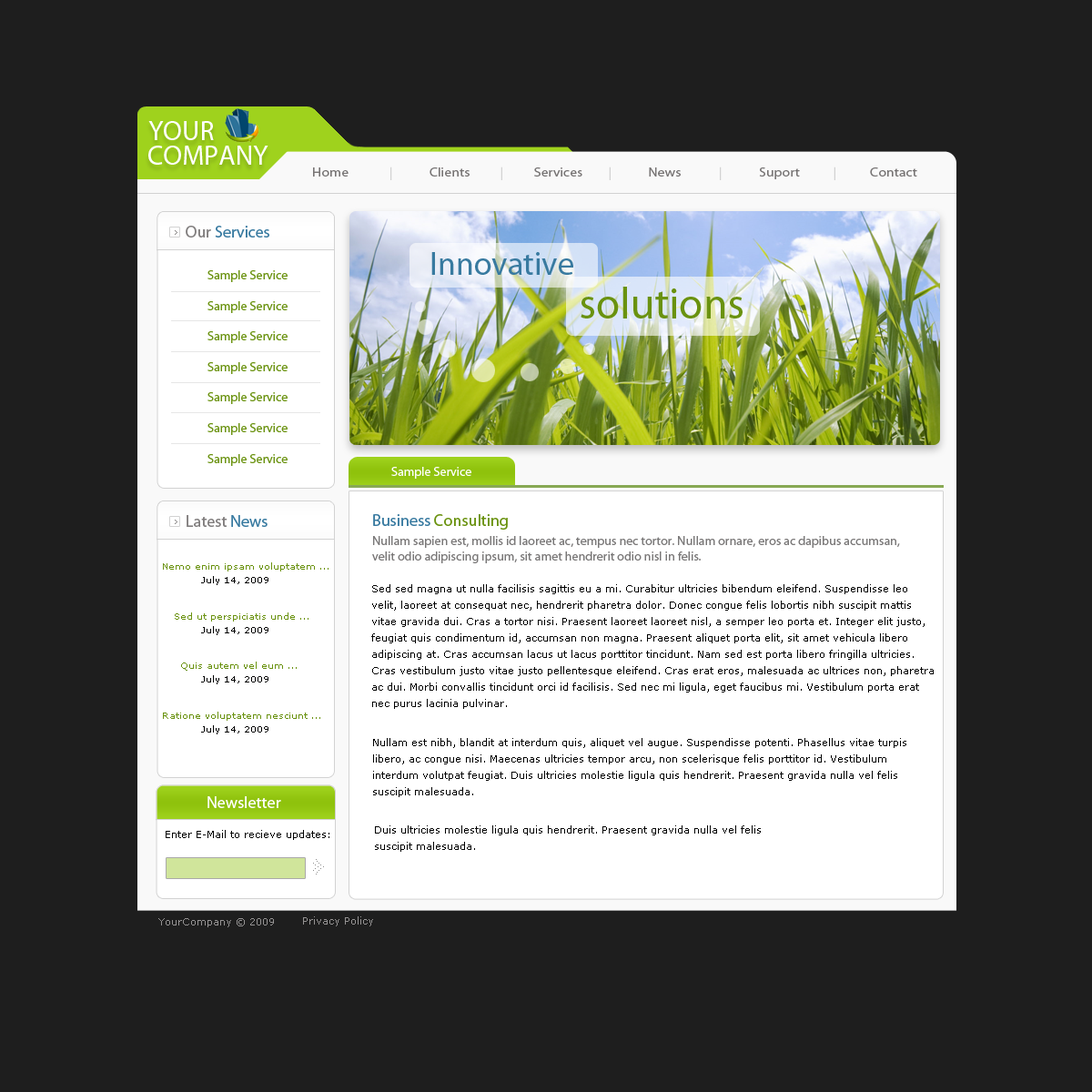
<style>
.page{position:relative;width:1092px;height:1092px;background:#1e1e1e}
.page>*{position:absolute;margin:0}
.t1{font:27.3px "MyriadPro-Regular";color:#ffffff}
.t2{font:12.7px "MyriadPro-Regular";color:#777474;scale:1.13 1}
.t3{font:12.7px "MyriadPro-Regular";color:#d2d2d2;scale:1.13 1}
.t4{font:16.4px "MyriadPro-Regular";color:#387aa0}
.t5{font:16.4px "MyriadPro-Regular";color:#807d7d}
.t6{font:32.8px "MyriadPro-Regular";color:#387aa0}
.t7{font:12.7px "MyriadPro-Regular";color:#6a920f}
.t8{font:43.7px "MyriadPro-Regular";color:#6a920f}
.t9{font:12.7px "MyriadPro-Regular";color:#fefefe}
.t10{font:16.4px "MyriadPro-Regular";color:#6a920f}
.t11{font:12.7px "MyriadPro-Regular";color:#797777}
.t12{font:9.1px "Verdana";color:#6a920f}
.t13{font:9.1px "Verdana";color:#000000}
.t14{font:10px/16.4px "Verdana";color:#000000}
.t15{font:16.4px "MyriadPro-Regular";color:#fefdfd}
.t16{font:10px "Verdana";color:#000000}
.t17{font:10px "Verdana";color:#959393}
</style>
<div class="page">
<p class="t1" style="left:148px;top:121px;width:66px;height:19px">YOUR</p>
<p class="t1" style="left:148px;top:146px;width:120px;height:19px">COMPANY</p>
<p class="t2" style="left:313px;top:167px;width:604px;height:13px">Home  <span class="t3"> |</span>   Clients   <span class="t3">|</span>          Services   <span class="t3">| </span>  News   <span class="t3">|</span>   Suport  <span class="t3"> | </span>  Contact</p>
<p class="t4" style="left:186px;top:226px;width:83px;height:12px"><span class="t5">Our </span>Services</p>
<p class="t6" style="left:431px;top:252px;width:142px;height:23px">Innovative</p>
<p class="t7" style="left:207px;top:270px;width:81px;height:196px">Sample Service<br><br>Sample Service<br><br>Sample Service<br><br>Sample Service<br><br>Sample Service<br><br>Sample Service<br><br>Sample Service</p>
<p class="t8" style="left:581px;top:287px;width:162px;height:31px">solutions</p>
<p class="t9" style="left:391px;top:467px;width:80px;height:12px">Sample Service</p>
<p class="t5" style="left:187px;top:515px;width:81px;height:12px">Latest <span class="t4">News</span></p>
<p class="t10" style="left:373px;top:514px;width:135px;height:16px"><span class="t4">Business </span>Consulting</p>
<p class="t11" style="left:372px;top:536px;width:528px;height:27px">Nullam sapien est, mollis id laoreet ac, tempus nec tortor. Nullam ornare, eros ac dapibus accumsan,<br>velit odio adipiscing ipsum, sit amet hendrerit odio nisl in felis.</p>
<p class="t12" style="left:163px;top:562px;width:166px;height:9px">Nemo enim ipsam voluptatem ...</p>
<p class="t13" style="left:201px;top:576px;width:67px;height:9px">July 14, 2009</p>
<p class="t14" style="left:371px;top:584px;width:563px;height:125px">Sed sed magna ut nulla facilisis sagittis eu a mi. Curabitur ultricies bibendum eleifend. Suspendisse leo <br>velit, laoreet at consequat nec, hendrerit pharetra dolor. Donec congue felis lobortis nibh suscipit mattis <br>vitae gravida dui. Cras a tortor nisi. Praesent laoreet laoreet nisl, a semper leo porta et. Integer elit justo, <br>feugiat quis condimentum id, accumsan non magna. Praesent aliquet porta elit, sit amet vehicula libero <br>adipiscing at. Cras accumsan lacus ut lacus porttitor tincidunt. Nam sed est porta libero fringilla ultricies. <br>Cras vestibulum justo vitae justo pellentesque eleifend. Cras erat eros, malesuada ac ultrices non, pharetra <br>ac dui. Morbi convallis tincidunt orci id facilisis. Sed nec mi ligula, eget faucibus mi. Vestibulum porta erat <br>nec purus lacinia pulvinar.</p>
<p class="t12" style="left:175px;top:612px;width:133px;height:10px">Sed ut perspiciatis unde ...</p>
<p class="t13" style="left:201px;top:626px;width:67px;height:9px">July 14, 2009</p>
<p class="t12" style="left:181px;top:662px;width:116px;height:9px">Quis autem vel eum ...</p>
<p class="t13" style="left:201px;top:675px;width:67px;height:9px">July 14, 2009</p>
<p class="t12" style="left:163px;top:712px;width:157px;height:9px">Ratione voluptatem nesciunt ...</p>
<p class="t13" style="left:201px;top:725px;width:67px;height:9px">July 14, 2009</p>
<p class="t14" style="left:373px;top:738px;width:533px;height:59px">Nullam est nibh, blandit at interdum quis, aliquet vel augue. Suspendisse potenti. Phasellus vitae turpis<br>libero, ac congue nisi. Maecenas ultricies tempor arcu, non scelerisque felis porttitor id. Vestibulum <br>interdum volutpat feugiat. Duis ultricies molestie ligula quis hendrerit. Praesent gravida nulla vel felis <br>suscipit malesuada.</p>
<p class="t15" style="left:207px;top:796px;width:74px;height:12px">Newsletter</p>
<p class="t16" style="left:166px;top:830px;width:163px;height:10px">Enter E-Mail to recieve updates:</p>
<p class="t14" style="left:375px;top:825px;width:386px;height:27px">Duis ultricies molestie ligula quis hendrerit. Praesent gravida nulla vel felis <br>suscipit malesuada.</p>
<p class="t17" style="left:303px;top:916px;width:70px;height:10px">Privacy Policy</p>
<p class="t17" style="left:158px;top:918px;width:116px;height:9px">YourCompany © 2009</p>
</div>
